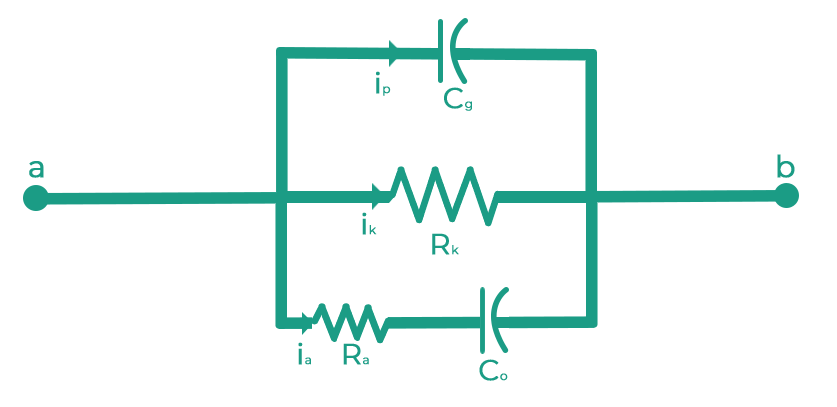
<style>
.page{position:relative;width:837px;height:407px;background:#ffffff}
.page>*{position:absolute;margin:0}
.t1{font:28.8px "Montserrat-Regular";letter-spacing:0.005em;color:#1b9c85;font-weight:bold}
.t2{font:12px "Montserrat-Regular";letter-spacing:0.005em;color:#1b9c85;font-weight:bold}
.t3{font:30px "Montserrat-Regular";letter-spacing:0.005em;color:#1b9c85;font-weight:bold}
</style>
<div class="page">
<p class="t1" style="left:376px;top:71px;width:15px;height:25px">i<span class="t2">p</span></p>
<p class="t1" style="left:444px;top:87px;width:28px;height:24px">C<span class="t2">g</span></p>
<p class="t3" style="left:29px;top:161px;width:15px;height:17px">a</p>
<p class="t3" style="left:777px;top:154px;width:18px;height:24px">b</p>
<p class="t1" style="left:362px;top:212px;width:15px;height:23px">i<span class="t2">k</span></p>
<p class="t1" style="left:432px;top:233px;width:27px;height:22px">R<span class="t2">k</span></p>
<p class="t1" style="left:298px;top:342px;width:13px;height:23px">i<span class="t2">a</span></p>
<p class="t1" style="left:343px;top:343px;width:26px;height:22px">R<span class="t2">a</span></p>
<p class="t1" style="left:479px;top:359px;width:29px;height:22px">C<span class="t2">o</span></p>
</div>
